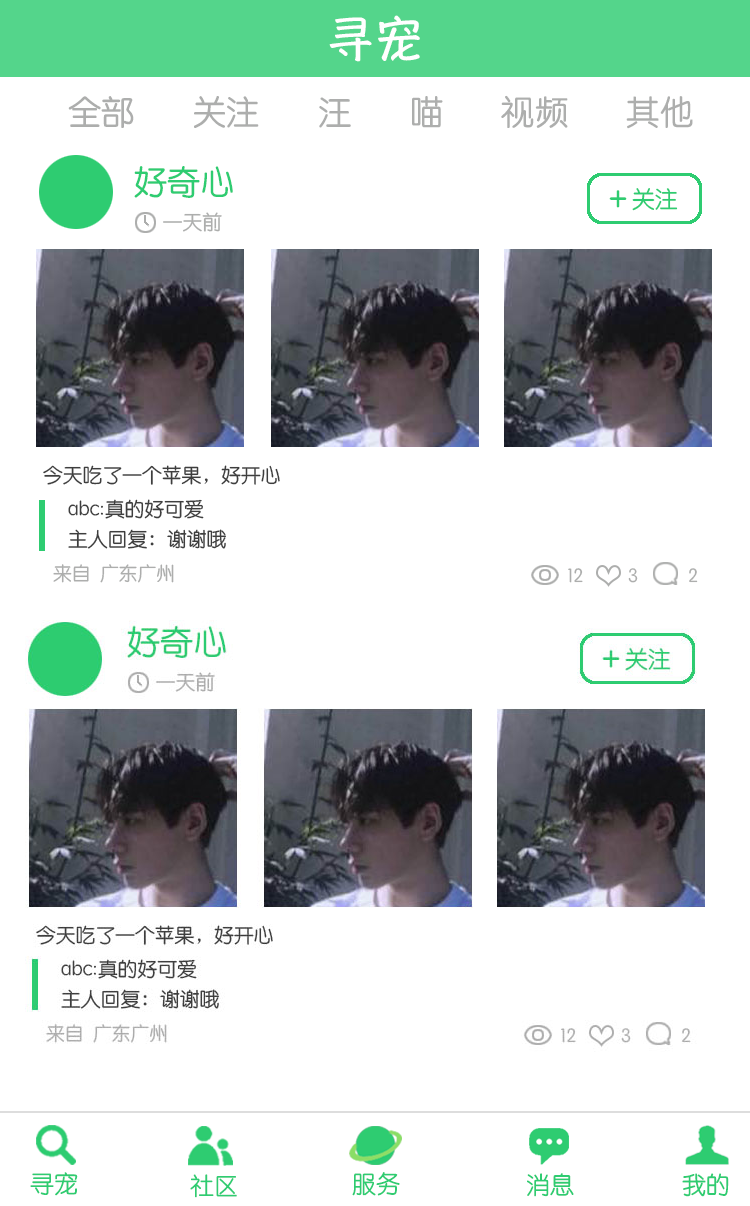
<style>
.page{position:relative;width:750px;height:1206px;background:#ffffff}
.page>*{position:absolute;margin:0}
.t1{font:48.7px "HannotateSC-W7";color:#ffffff}
.t2{font:33.3px "STYuanti-SC-Regular";color:#adaead}
.t3{font:33.3px "STYuanti-SC-Regular";color:#3e3e3e}
.t4{font:33.3px "STYuanti-SC-Regular";color:#2ecc71}
.t5{font:22.9px "STYuanti-SC-Regular";color:#2ecc71}
.t6{font:19.8px "STYuanti-SC-Regular";color:#adaead}
.t7{font:19.8px "STYuanti-SC-Regular";color:#3e3e3e}
.t8{font:19.8px/30.2px "STYuanti-SC-Regular";color:#3e3e3e}
.t9{font:18.8px "STYuanti-SC-Regular";color:#adaead}
.t10{font:24px "STYuanti-SC-Regular";color:#2ecc71}
.t11{font:24px "STYuanti-SC-Regular"}
</style>
<div class="page">
<p class="t1" style="left:329px;top:15px;width:91px;height:47px">寻宠</p>
<p class="t2" style="left:68px;top:95px;width:625px;height:34px"><span class="t3">   </span>全部       关注       汪       喵       视频       其他</p>
<p class="t4" style="left:134px;top:166px;width:99px;height:32px">好奇心</p>
<p class="t5" style="left:632px;top:188px;width:46px;height:23px">关注</p>
<p class="t6" style="left:163px;top:212px;width:59px;height:20px">一天前</p>
<p class="t7" style="left:43px;top:465px;width:237px;height:20px">今天吃了一个苹果，好开心</p>
<p class="t8" style="left:68px;top:499px;width:158px;height:50px">abc:真的好可爱<br>主人回复：谢谢哦</p>
<p class="t9" style="left:53px;top:564px;width:121px;height:19px">来自  广东广州</p>
<p class="t6" style="left:568px;top:568px;width:15px;height:15px">12</p>
<p class="t6" style="left:628px;top:568px;width:10px;height:15px">3</p>
<p class="t6" style="left:689px;top:568px;width:9px;height:15px">2</p>
<p class="t10" style="left:30px;top:1172px;width:48px;height:24px">寻宠</p>
<p class="t10" style="left:190px;top:1174px;width:47px;height:24px">社区</p>
<p class="t11" style="left:352px;top:1173px;width:48px;height:24px">服务</p>
<p class="t10" style="left:352px;top:1172px;width:48px;height:24px">服务</p>
<p class="t11" style="left:526px;top:1173px;width:47px;height:24px">消息</p>
<p class="t10" style="left:527px;top:1173px;width:47px;height:24px">消息</p>
<p class="t10" style="left:682px;top:1173px;width:47px;height:24px">我的</p>
<p class="t10" style="left:682px;top:1173px;width:47px;height:24px">我的</p>
</div>
